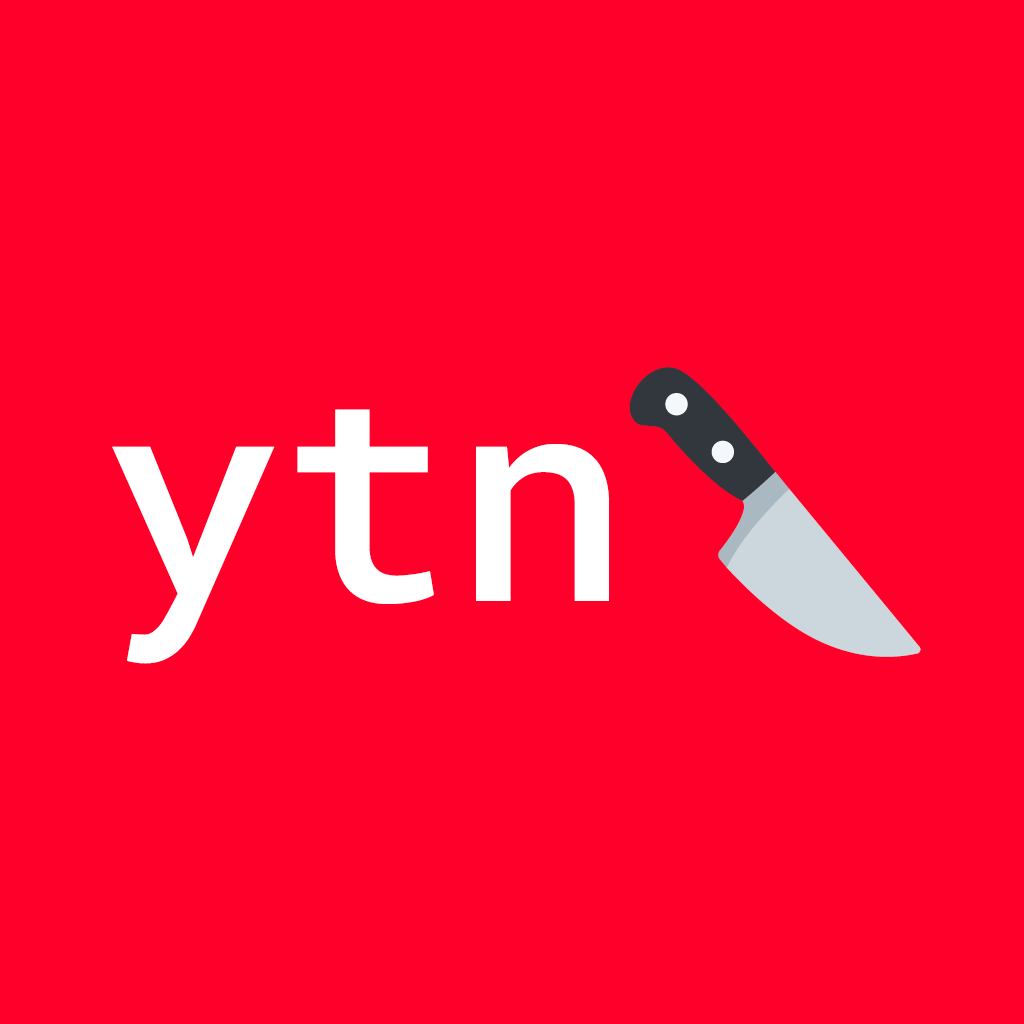
<style>
.page{position:relative;width:1024px;height:1024px;background:#ff002a}
.page>*{position:absolute;margin:0}
.t1{font:291.7px "RobotoMono-Medium"}
.t2{font:291.7px "TwitterColorEmojiSVGinOT"}
</style>
<div class="page">
<p class="t1" style="left:112px;top:367px;width:809px;height:297px">ytn<span class="t2">🔪</span></p>
</div>
